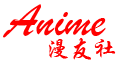
<style>
.page{position:relative;width:120px;height:60px;background:#ffffff}
.page>*{position:absolute;margin:0}
.t1{font:48px "STXingkai";color:#fe0000}
.t2{font:24px "STXingkai";color:#fe0000}
</style>
<div class="page">
<p class="t1" style="left:3px;top:4px;width:103px;height:34px">Anime</p>
<p class="t2" style="left:48px;top:38px;width:68px;height:22px">漫友社</p>
</div>
